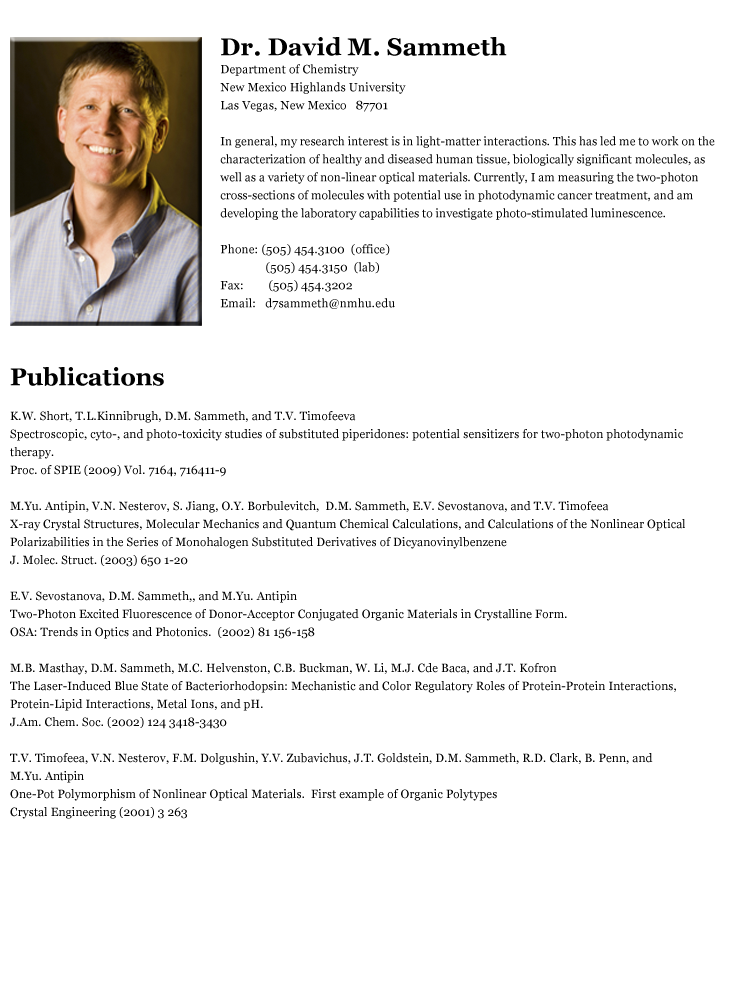
<style>
.page{position:relative;width:730px;height:1000px;background:#ffffff}
.page>*{position:absolute;margin:0}
.t1{font:12px/18px "Georgia";color:#000000}
.t2{font:24px "Georgia-Bold";letter-spacing:0.01em;color:#000000}
.t3{font:12px/18px "Georgia";letter-spacing:0.01em;color:#000000}
.t4{font:24px "Georgia-Bold";color:#000000}
.t5{font:12px/18px "Georgia";letter-spacing:-0.01em;color:#000000}
</style>
<div class="page">
<p class="t1" style="left:220px;top:37px;width:495px;height:273px"><span class="t2">Dr. David M. Sammeth<br></span><span class="t3">Department of Chemistry<br>New Mexico Highlands University<br>Las Vegas, New Mexico   87701<br><br></span>In general, my research interest is in light-matter interactions. This has led me to work on the characterization of healthy and diseased human tissue, biologically significant molecules, as well as a variety of non-linear optical materials. Currently, I am measuring the two-photon cross-sections of molecules with potential use in photodynamic cancer treatment, and am developing the laboratory capabilities to investigate photo-stimulated luminescence.<br><span class="t3"><br>Phone: (505) 454.3100  (office)<br>               (505) 454.3150  (lab)<br>Fax:      (505) 454.3202<br>Email:   d7sammeth@nmhu.edu</span></p>
<p class="t4" style="left:10px;top:367px;width:154px;height:19px">Publications</p>
<p class="t3" style="left:10px;top:411px;width:675px;height:408px">K.W. Short, T.L.Kinnibrugh, D.M. Sammeth, and T.V. Timofeeva <br>Spectroscopic, cyto-, and photo-toxicity studies of substituted piperidones: potential sensitizers for two-photon photodynamic therapy.<br>Proc. of SPIE (2009) Vol. 7164, 716411-9<br><br>M.Yu. Antipin, V.N. Nesterov, S. Jiang, O.Y. Borbulevitch,  D.M. Sammeth, E.V. Sevostanova, and T.V. Timofeea<br>X-ray Crystal Structures, Molecular Mechanics and Quantum Chemical Calculations, and Calculations of the Nonlinear Optical Polarizabilities in the Series of Monohalogen Substituted Derivatives of Dicyanovinylbenzene<br>J. Molec. Struct. (2003) 650 1-20<br><br>E.V. Sevostanova, D.M. Sammeth,, and M.Yu. Antipin<br>Two-Photon Excited Fluorescence of Donor-Acceptor Conjugated Organic Materials in Crystalline Form.<br>OSA: Trends in Optics and Photonics.  (2002) 81 156-158<br><br>M.B. Masthay, D.M. Sammeth, M.C. Helvenston, C.B. Buckman, W. Li, M.J. Cde Baca, and J.T. Kofron   <br>The Laser-Induced Blue State of Bacteriorhodopsin: Mechanistic and Color Regulatory Roles of Protein-Protein Interactions, Protein-Lipid Interactions, Metal Ions, and pH. <br>J.Am. Chem. Soc. (2002) 124 3418-3430<br><br>T.V. Timofeea, V.N. Nesterov, F.M. Dolgushin, Y.V. Zubavichus, J.T. Goldstein, D.M. Sammeth, R.D. Clark, B. Penn, and <br>M.Yu. <span class="t5">Antipin<br></span>One-Pot Polymorphism of Nonlinear Optical Materials.  First example of Organic Polytypes<br>Crystal Engineering (2001) 3 263</p>
</div>
